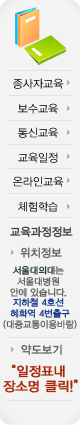
<style>
.page{position:relative;width:80px;height:425px;background:#f3f3f3}
.page>*{position:absolute;margin:0}
.t1{font:11px "YDIYGO120";color:#40403f;font-weight:bold}
.t2{font:11px "YDIYGO120";color:#5f5f5b;font-weight:bold}
.t3{font:9px "YDIYGO110";color:#5f5f5b;font-weight:bold}
.t4{font:9px "YDIYGO110";color:#1c3621;font-weight:bold}
.t5{font:9px "YDIYGO110";color:#0d3284;font-weight:bold}
.t6{font:13px "YDIYGO120";color:#a62806;font-weight:bold}
</style>
<div class="page">
<p class="t1" style="left:10px;top:226px;width:63px;height:12px">교육과정정보</p>
<p class="t2" style="left:20px;top:247px;width:42px;height:12px">위치정보</p>
<p class="t3" style="left:3px;top:266px;width:74px;height:63px;text-align:center"><span class="t4">서울대의대</span>는 <br>서울대병원 <br>안에 있습니다. <br><span class="t5">지하철 4호선 <br>혜화역 4번출구<br></span>(대중교통이용바람)</p>
<p class="t2" style="left:21px;top:344px;width:41px;height:11px">약도보기</p>
<p class="t6" style="left:3px;top:364px;width:75px;height:29px">“일정표내 <br>장소명 클릭!”</p>
</div>
